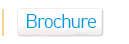
<style>
.page{position:relative;width:129px;height:44px;background:#ffffff}
.page>*{position:absolute;margin:0}
.t1{font:20.3px "DINAlternate-Regular";letter-spacing:-0.08em;color:#009de0}
</style>
<div class="page">
<p class="t1" style="left:26px;top:14px;width:71px;height:14px">Brochure</p>
</div>
